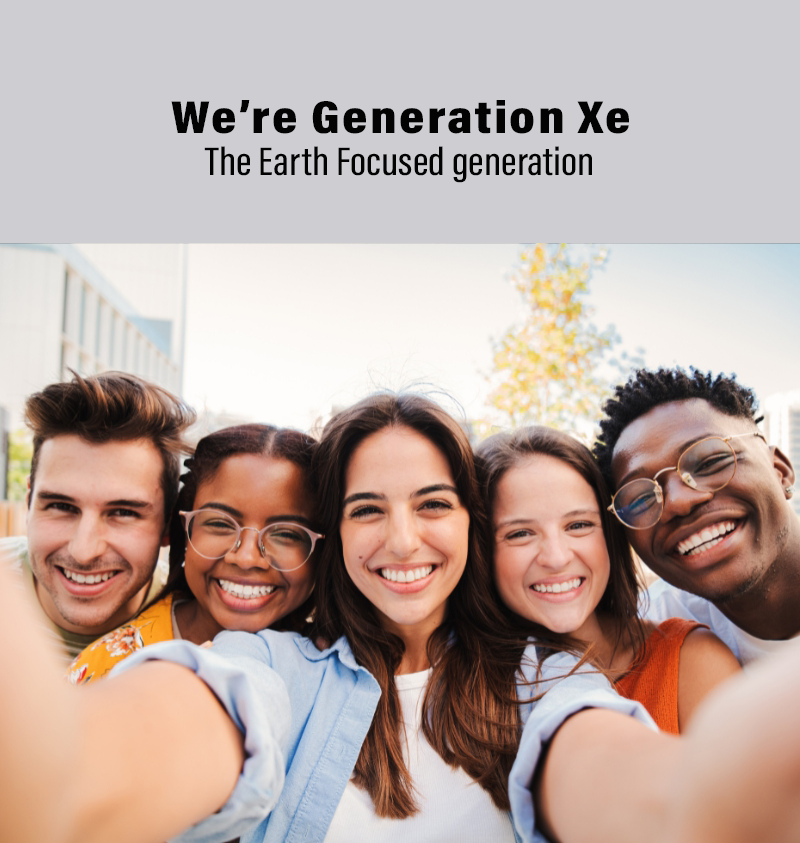
<style>
.page{position:relative;width:800px;height:843px;background:#cecdd2}
.page>*{position:absolute;margin:0}
.t1{font:41px/41.7px "AcuminConcept-ExtraCondensedMedium";color:#030303;scale:1.19 1}
.t2{font:46.6px/41.7px "AcuminConcept-CondensedBlack";letter-spacing:0.04em;color:#030303;scale:1.19 1}
</style>
<div class="page">
<p class="t1" style="left:171px;top:100px;width:458px;height:83px;text-align:center"><span class="t2">We’re Generation Xe<br></span>The Earth Focused generation</p>
</div>
